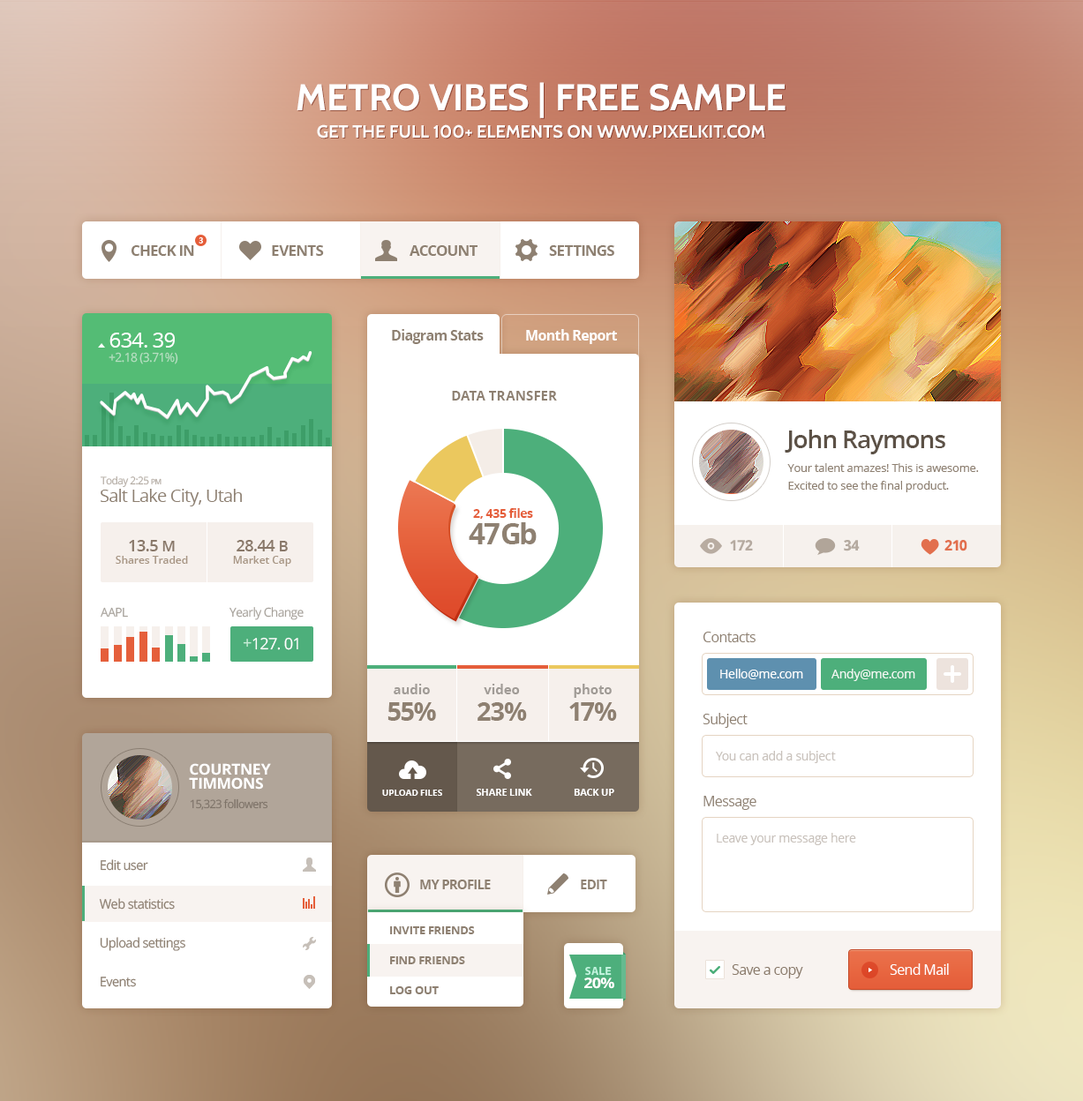
<style>
.page{position:relative;width:1083px;height:1101px;background:#ffffff}
.page>*{position:absolute;margin:0}
.t1{font:37.1px "Cabin-Bold";color:#ffffff;text-transform:uppercase}
.t2{font:17.6px "Cabin-Bold";color:#ffffff;text-transform:uppercase}
.t3{font:15px "OpenSans-Bold";letter-spacing:-0.05em;color:#8e8071;text-transform:uppercase}
.t4{font:7.9px "MyriadWebPro-Bold";color:#ffffff;text-transform:uppercase}
.t5{font:14.1px "OpenSans-Bold";letter-spacing:-0.04em;color:#8e8071}
.t6{font:14.1px "OpenSans-Bold";letter-spacing:-0.04em;color:#ffffff}
.t7{font:21.2px "OpenSans";letter-spacing:-0.04em;color:#ffffff}
.t8{font:12.4px "OpenSans";letter-spacing:-0.04em;color:#b7dfc2}
.t9{font:13.2px "OpenSans-Bold";color:#8e8071;text-transform:uppercase}
.t10{font:24.7px "OpenSans-Semibold";letter-spacing:-0.04em;color:#5c5146}
.t11{font:11.5px/17.6px "OpenSans";letter-spacing:-0.02em;color:#8e8071}
.t12{font:10.6px "OpenSans";letter-spacing:-0.04em;color:#b4aca3}
.t13{font:10.6px "OpenSans";letter-spacing:-0.04em;color:#b4aca3;font-variant:small-caps}
.t14{font:17.6px "OpenSans";letter-spacing:-0.04em;color:#8e8071}
.t15{font:12.4px/1.8px "OpenSans-Bold";letter-spacing:-0.04em;color:#e55e3a}
.t16{font:29.1px/26.5px "OpenSans-Bold";letter-spacing:-0.04em;color:#8e8071}
.t17{font:29.1px/26.5px "OpenSans-Bold";color:#8e8071}
.t18{font:10.6px/12.4px "OpenSans-Semibold";letter-spacing:-0.005em;color:#ad9e8e}
.t19{font:15.9px/14.1px "OpenSans-Semibold";letter-spacing:-0.025em;color:#8e8071}
.t20{font:15px/14.1px "OpenSans-Semibold";letter-spacing:-0.025em;color:#8e8071}
.t21{font:14.4px "OpenSans-Bold";letter-spacing:-0.025em;color:#b5aaa0}
.t22{font:14.4px "OpenSans-Bold";letter-spacing:-0.025em;color:#e86741}
.t23{font:12.4px "OpenSans";letter-spacing:-0.04em;color:#a7a29b}
.t24{font:15.9px "OpenSans";letter-spacing:-0.04em;color:#ffffff}
.t25{font:15.9px "OpenSans";letter-spacing:-0.04em;color:#c7eed9}
.t26{font:14.1px "OpenSans";letter-spacing:-0.04em;color:#8e8071}
.t27{font:12.4px "OpenSans";letter-spacing:-0.02em;color:#ffffff}
.t28{font:12.4px "OpenSans";letter-spacing:-0.02em;color:#f2f8f3}
.t29{font:13.2px/28.2px "OpenSans-Bold";color:#a09b96}
.t30{font:25.6px/26.5px "OpenSans-Bold";letter-spacing:-0.05em;color:#8e8071}
.t31{font:12.4px "OpenSans";letter-spacing:-0.02em;color:#c9c2bc}
.t32{font:15px/14.3px "OpenSans-Bold";letter-spacing:-0.02em;color:#ffffff;text-transform:uppercase}
.t33{font:8.8px "OpenSans-Bold";letter-spacing:-0.02em;color:#ffffff;text-transform:uppercase}
.t34{font:9.7px "OpenSans-Bold";letter-spacing:-0.02em;color:#ffffff;text-transform:uppercase}
.t35{font:11.5px "OpenSans";letter-spacing:-0.04em;color:#7e7368}
.t36{font:13.2px/38.8px "OpenSans";letter-spacing:-0.04em;color:#8e8071}
.t37{font:13.2px "OpenSans-Bold";letter-spacing:-0.05em;color:#8e8071;text-transform:uppercase}
.t38{font:11.5px/30px "OpenSans-Bold";letter-spacing:-0.025em;color:#8e8071;text-transform:uppercase}
.t39{font:14.1px "OpenSans";letter-spacing:-0.04em;color:#ffffff}
.t40{font:14.4px "OpenSans-Bold";letter-spacing:-0.045em;color:#ffffff;text-transform:uppercase;scale:1.11 1}
</style>
<div class="page">
<p class="t1" style="left:297px;top:82px;width:488px;height:36px">Metro Vibes | Free Sample</p>
<p class="t2" style="left:317px;top:124px;width:448px;height:15px">Get the full 100+ Elements on www.PixelKit.com</p>
<p class="t3" style="left:131px;top:245px;width:63px;height:11px">check in</p>
<p class="t4" style="left:199px;top:237px;width:4px;height:7px">3</p>
<p class="t3" style="left:272px;top:245px;width:52px;height:11px">events</p>
<p class="t3" style="left:409px;top:245px;width:68px;height:11px">account</p>
<p class="t3" style="left:549px;top:245px;width:65px;height:11px">settings</p>
<p class="t5" style="left:392px;top:329px;width:92px;height:15px">Diagram Stats</p>
<p class="t6" style="left:526px;top:329px;width:91px;height:15px">Month Report</p>
<p class="t7" style="left:109px;top:333px;width:66px;height:15px">634. 39</p>
<p class="t8" style="left:109px;top:352px;width:69px;height:12px">+2.18 (3.71%)</p>
<p class="t9" style="left:452px;top:391px;width:105px;height:10px">Data transfer</p>
<p class="t10" style="left:784px;top:430px;width:161px;height:24px">John Raymons</p>
<p class="t11" style="left:787px;top:463px;width:192px;height:29px">Your talent amazes! This is awesome. Excited to see the final product.</p>
<p class="t12" style="left:100px;top:476px;width:61px;height:12px">Today 2:25 <span class="t13">pm</span></p>
<p class="t14" style="left:100px;top:489px;width:142px;height:18px">Salt Lake City, Utah</p>
<p class="t15" style="left:469px;top:508px;width:68px;height:36px;text-align:center">2, 435 files<br><span class="t16">47</span><span class="t17">Gb</span></p>
<p class="t18" style="left:116px;top:540px;width:72px;height:24px;text-align:center"><span class="t19">13.5 </span><span class="t20">M<br></span>Shares Traded</p>
<p class="t18" style="left:233px;top:540px;width:58px;height:27px;text-align:center"><span class="t19">28.44 </span><span class="t20">B<br></span>Market Cap</p>
<p class="t21" style="left:730px;top:540px;width:23px;height:11px">172</p>
<p class="t21" style="left:844px;top:540px;width:16px;height:12px">34</p>
<p class="t22" style="left:944px;top:540px;width:23px;height:12px">210</p>
<p class="t23" style="left:101px;top:607px;width:27px;height:11px">AAPL</p>
<p class="t23" style="left:229px;top:607px;width:75px;height:13px">Yearly Change</p>
<p class="t24" style="left:243px;top:637px;width:55px;height:13px"><span class="t25">+</span>127. 01</p>
<p class="t26" style="left:702px;top:632px;width:53px;height:10px">Contacts</p>
<p class="t27" style="left:720px;top:669px;width:83px;height:10px">Hello@me.com</p>
<p class="t28" style="left:831px;top:669px;width:84px;height:12px">Andy@me.com</p>
<p class="t29" style="left:387px;top:684px;width:49px;height:37px;text-align:center">audio<br><span class="t30">55%</span></p>
<p class="t29" style="left:477px;top:684px;width:50px;height:37px;text-align:center">video<br><span class="t30">23%</span></p>
<p class="t29" style="left:569px;top:684px;width:48px;height:37px;text-align:center">photo<br><span class="t30">17%</span></p>
<p class="t26" style="left:702px;top:713px;width:45px;height:15px">Subject</p>
<p class="t31" style="left:716px;top:751px;width:120px;height:12px">You can add a subject</p>
<p class="t32" style="left:189px;top:763px;width:82px;height:27px">Courtney <br>Timmons</p>
<p class="t33" style="left:382px;top:790px;width:60px;height:6px">upload files</p>
<p class="t34" style="left:477px;top:789px;width:55px;height:7px">share link</p>
<p class="t34" style="left:574px;top:789px;width:40px;height:7px">back up</p>
<p class="t26" style="left:703px;top:796px;width:53px;height:14px">Message</p>
<p class="t35" style="left:190px;top:799px;width:78px;height:11px">15,323 followers</p>
<p class="t31" style="left:717px;top:833px;width:139px;height:12px">Leave your message here</p>
<p class="t36" style="left:99px;top:860px;width:86px;height:127px">Edit user<br>Web statistics<br>Upload settings<br>Events</p>
<p class="t37" style="left:420px;top:880px;width:71px;height:10px">My Profile</p>
<p class="t37" style="left:581px;top:880px;width:26px;height:10px">Edit</p>
<p class="t38" style="left:390px;top:927px;width:85px;height:68px">Invite friends<br>find friends<br>Log out</p>
<p class="t26" style="left:732px;top:965px;width:71px;height:14px">Save a copy</p>
<p class="t39" style="left:890px;top:964px;width:59px;height:11px">Send Mail</p>
<p class="t40" style="left:584px;top:978px;width:30px;height:11px">20%</p>
</div>
